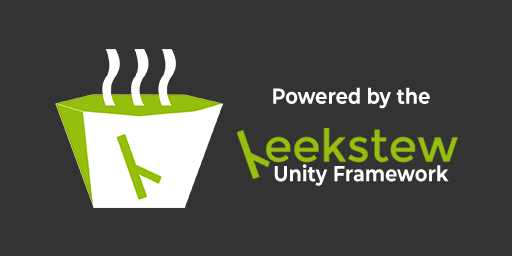
<style>
.page{position:relative;width:512px;height:256px;background:#333333}
.page>*{position:absolute;margin:0}
.t1{font:21.7px "Montserrat-Bold";color:#ffffff;scale:0.89 1}
</style>
<div class="page">
<p class="t1" style="left:273px;top:87px;width:157px;height:22px">Powered by the</p>
<p class="t1" style="left:274px;top:164px;width:175px;height:22px">Unity Framework</p>
</div>
